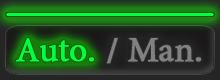
<style>
.page{position:relative;width:220px;height:80px}
.page>*{position:absolute;margin:0}
.t1{font:42.3px "AdobeThai-Regular";color:#00ff42;font-weight:bold}
.t2{font:42.3px "AdobeThai-Regular";color:#818181;font-weight:bold}
</style>
<div class="page">
<p class="t1" style="left:16px;top:38px;width:78px;height:24px">Auto.</p>
<p class="t2" style="left:107px;top:38px;width:11px;height:26px">/</p>
<p class="t2" style="left:128px;top:38px;width:73px;height:24px">Man.</p>
</div>
